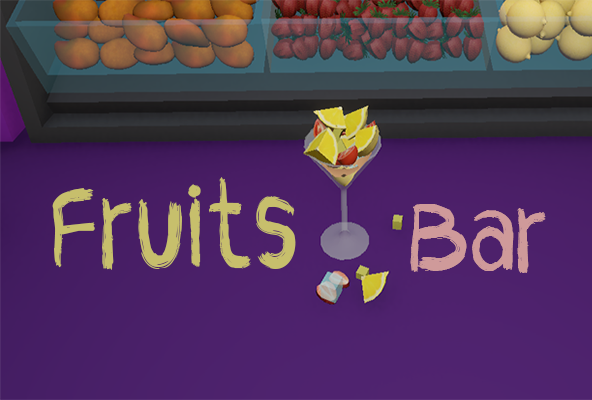
<style>
.page{position:relative;width:592px;height:400px}
.page>*{position:absolute;margin:0}
.t1{font:118.3px "CFCrayons-Regular";color:#c7bf6c;scale:0.88 1}
.t2{font:108.4px "CFCrayons-Regular";color:#cf9a9a;scale:0.88 1}
</style>
<div class="page">
<p class="t1" style="left:52px;top:177px;width:244px;height:93px">Fruits</p>
<p class="t2" style="left:410px;top:204px;width:136px;height:69px">Bar</p>
</div>
